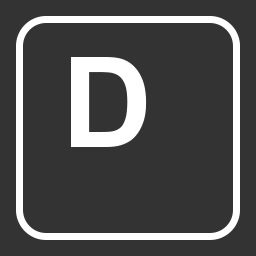
<style>
.page{position:relative;width:256px;height:256px;background:#333333}
.page>*{position:absolute;margin:0}
.t1{font:125px "Arial-BoldMT";color:#ffffff}
</style>
<div class="page">
<p class="t1" style="left:71px;top:57px;width:76px;height:90px">D</p>
</div>
